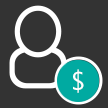
<style>
.page{position:relative;width:108px;height:108px;background:#333333}
.page>*{position:absolute;margin:0}
.t1{font:26px "MicrosoftPhagsPa";color:#ffffff}
</style>
<div class="page">
<p class="t1" style="left:73px;top:69px;width:11px;height:24px">$</p>
</div>
